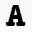
<style>
.page{position:relative;width:32px;height:32px;background:#f7f9fa}
.page>*{position:absolute;margin:0}
.t1{font:32px "AmericanTypewriter-CondensedBold";color:#000000}
</style>
<div class="page">
<p class="t1" style="left:5px;top:5px;width:21px;height:21px">A</p>
</div>
